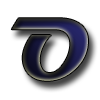
<style>
.page{position:relative;width:100px;height:100px;background:#ffffff}
.page>*{position:absolute;margin:0}
.t1{font:90px "Magneto-Bold";letter-spacing:0.005em}
</style>
<div class="page">
<p class="t1" style="left:11px;top:18px;width:77px;height:63px">O</p>
</div>
